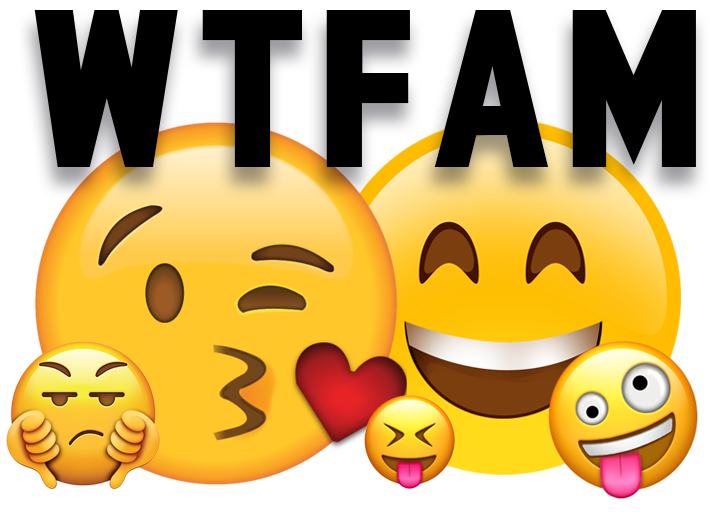
<style>
.page{position:relative;width:720px;height:512px}
.page>*{position:absolute;margin:0}
.t1{font:196.3px "WagnerZip-Change";letter-spacing:0.025em;color:#000000}
</style>
<div class="page">
<p class="t1" style="left:34px;top:10px;width:662px;height:157px">WTFam</p>
</div>
